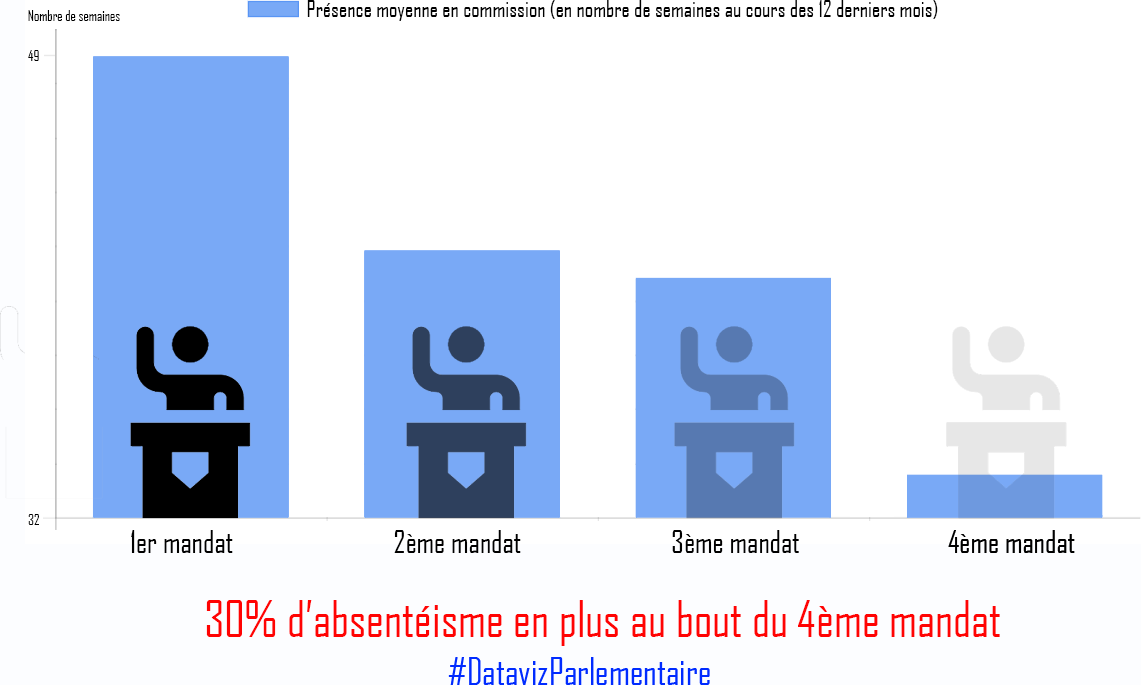
<style>
.page{position:relative;width:1141px;height:685px;background:#ffffff}
.page>*{position:absolute;margin:0}
.t1{font:22px "AgencyFB-Reg";color:#000000}
.t2{font:14px "AgencyFB-Reg";color:#000000}
.t3{font:30px "AgencyFB-Reg";color:#000000}
.t4{font:48px "AgencyFB-Reg";color:#ff0303}
</style>
<div class="page">
<p class="t1" style="left:307px;top:0px;width:631px;height:21px">Présence moyenne en commission (en nombre de semaines au cours des 12 derniers mois)</p>
<p class="t2" style="left:28px;top:10px;width:92px;height:11px">Nombre de semaines</p>
<p class="t2" style="left:28px;top:50px;width:11px;height:11px">49</p>
<p class="t2" style="left:28px;top:514px;width:11px;height:11px">32</p>
<p class="t3" style="left:131px;top:530px;width:102px;height:23px">1er mandat</p>
<p class="t3" style="left:394px;top:530px;width:127px;height:23px">2ème mandat</p>
<p class="t3" style="left:672px;top:530px;width:127px;height:23px">3ème mandat</p>
<p class="t4" style="left:206px;top:600px;width:794px;height:46px">30% d’absentéisme en plus au bout du 4ème mandat</p>
</div>
